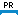
<style>
.page{position:relative;width:18px;height:16px;background:#ffffff}
.page>*{position:absolute;margin:0}
.t1{font:8px "Supertext";color:#000000}
</style>
<div class="page">
<p class="t1" style="left:4px;top:2px;width:9px;height:6px">PR</p>
</div>
